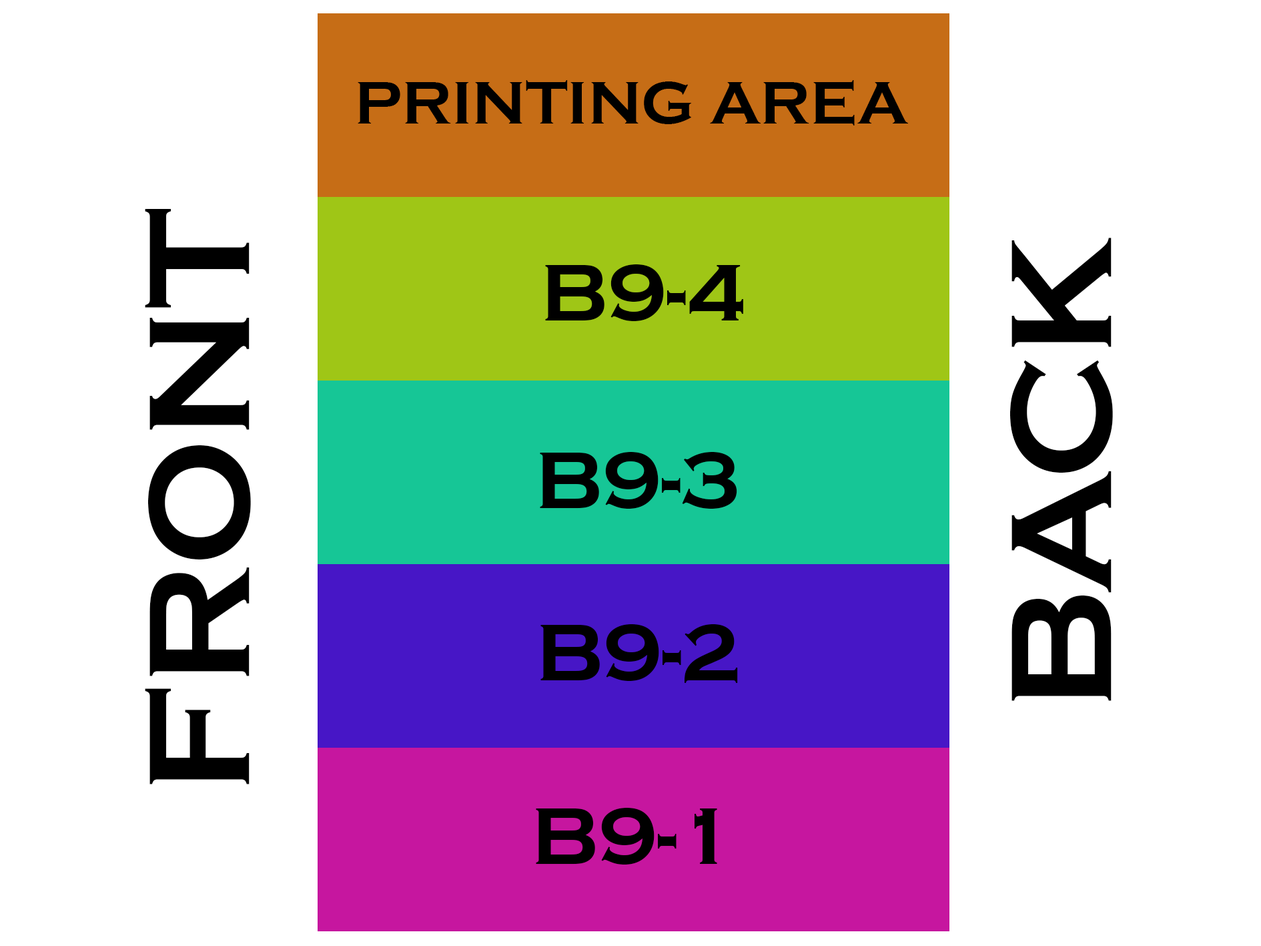
<style>
.page{position:relative;width:1261px;height:946px;background:#ffffff}
.page>*{position:absolute;margin:0}
.t1{font:61.8px "CopperplateGothic-Bold";color:#000000}
.t2{font:149px "CopperplateGothic-Bold";color:#000000}
.t3{font:83.4px "CopperplateGothic-Bold";color:#000000}
</style>
<div class="page">
<p class="t1" style="left:358px;top:80px;width:550px;height:45px">PRINTING AREA</p>
<p class="t2" style="left:145px;top:209px;width:106px;height:575px;rotate:-90deg">FRONT</p>
<p class="t2" style="left:1010px;top:238px;width:103px;height:463px;rotate:-90deg">BACK</p>
<p class="t3" style="left:545px;top:264px;width:198px;height:57px">B9-4</p>
<p class="t3" style="left:540px;top:452px;width:197px;height:56px">B9-3</p>
<p class="t3" style="left:540px;top:624px;width:198px;height:59px">B9-2</p>
<p class="t3" style="left:536px;top:807px;width:181px;height:57px">B9-1</p>
</div>
